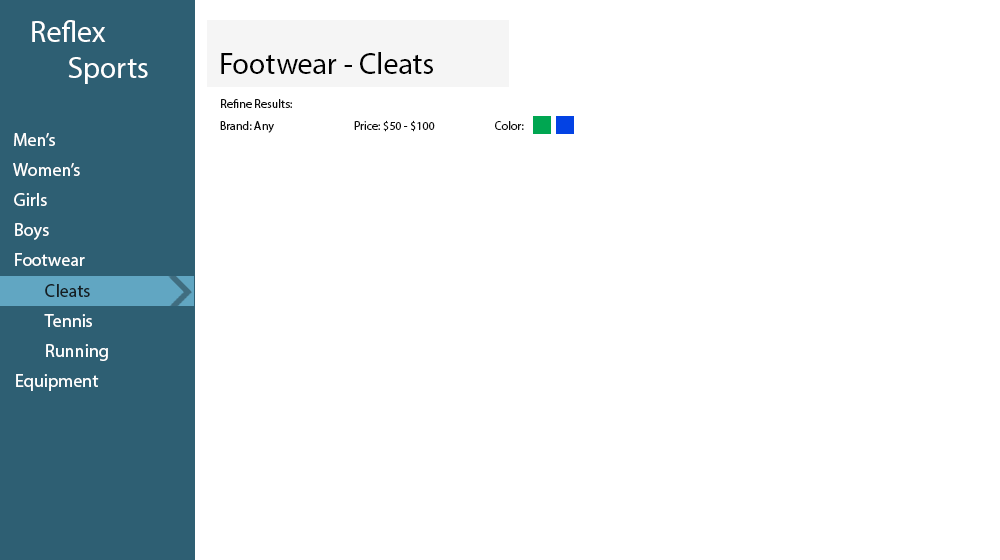
<style>
.page{position:relative;width:1000px;height:560px;background:#ffffff}
.page>*{position:absolute;margin:0}
.t1{font:30px "MyriadPro-Regular";color:#ffffff}
.t2{font:30px "MyriadPro-Regular";color:#000000}
.t3{font:12px "MyriadPro-Regular";color:#0d0d0d}
.t4{font:18px "MyriadPro-Regular";color:#ffffff}
.t5{font:18px "MyriadPro-Regular";color:#161e22}
</style>
<div class="page">
<p class="t1" style="left:32px;top:20px;width:116px;height:64px">Reflex <br>      Sports</p>
<p class="t2" style="left:221px;top:52px;width:212px;height:22px">Footwear - Cleats</p>
<p class="t3" style="left:221px;top:99px;width:71px;height:9px">Refine Results:</p>
<p class="t3" style="left:220px;top:121px;width:54px;height:12px">Brand: Any</p>
<p class="t3" style="left:354px;top:120px;width:81px;height:12px">Price: $50 - $100</p>
<p class="t3" style="left:495px;top:121px;width:29px;height:9px">Color:</p>
<p class="t4" style="left:14px;top:133px;width:41px;height:13px">Men’s</p>
<p class="t4" style="left:13px;top:163px;width:67px;height:13px">Women’s</p>
<p class="t4" style="left:14px;top:193px;width:33px;height:13px">Girls</p>
<p class="t4" style="left:15px;top:223px;width:34px;height:17px">Boys</p>
<p class="t4" style="left:15px;top:253px;width:70px;height:13px">Footwear</p>
<p class="t5" style="left:45px;top:284px;width:45px;height:13px">Cleats</p>
<p class="t4" style="left:44px;top:314px;width:48px;height:13px">Tennis</p>
<p class="t4" style="left:46px;top:344px;width:62px;height:17px">Running</p>
<p class="t4" style="left:16px;top:374px;width:83px;height:17px">Equipment</p>
</div>
